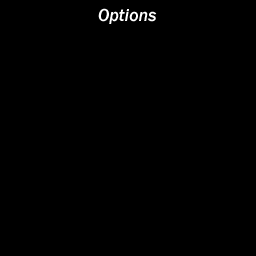
<style>
.page{position:relative;width:256px;height:256px;background:#000000}
.page>*{position:absolute;margin:0}
.t1{font:18px "FranklinGothic-MediumItalic";color:#ffffff}
</style>
<div class="page">
<p class="t1" style="left:98px;top:8px;width:59px;height:16px">Options</p>
</div>
